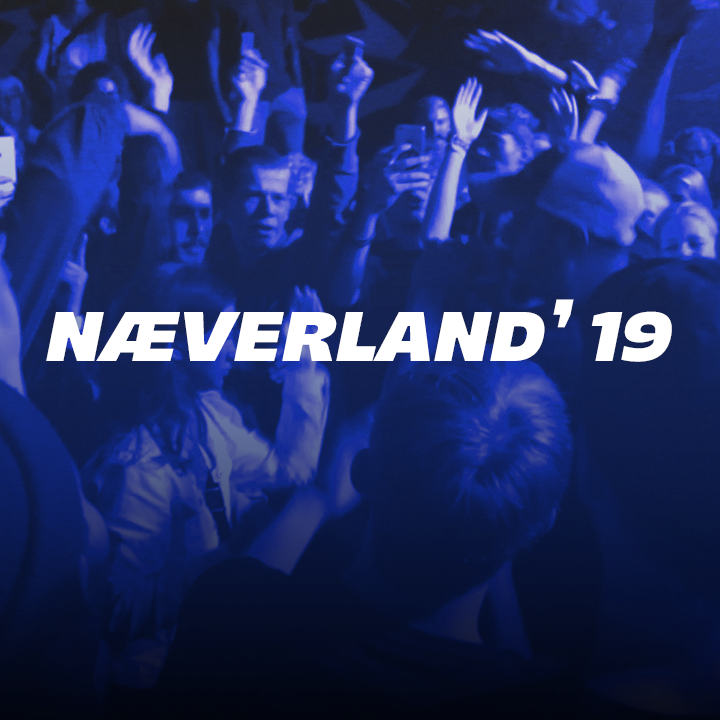
<style>
.page{position:relative;width:720px;height:720px}
.page>*{position:absolute;margin:0}
.t1{font:70px "Majoris-Italic";color:#ffffff}
</style>
<div class="page">
<p class="t1" style="left:46px;top:299px;width:626px;height:63px">NÆVERLAND’ 19</p>
</div>
